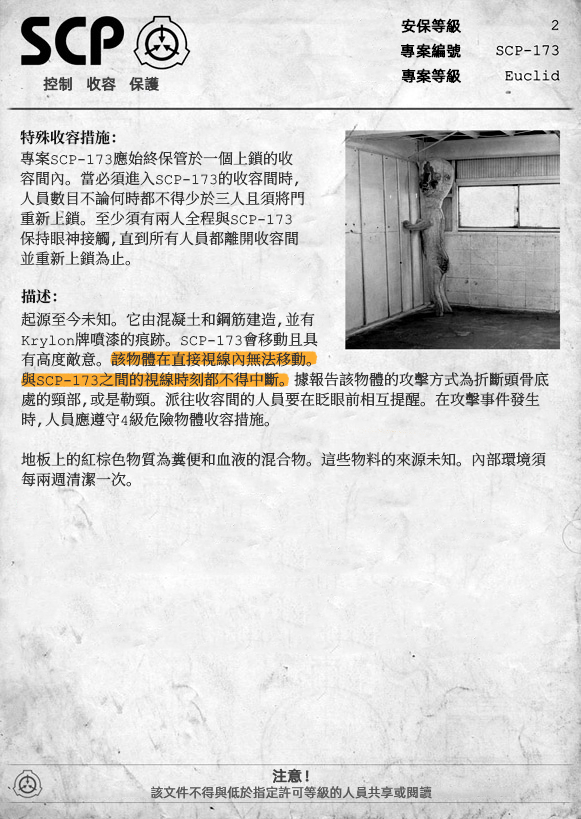
<style>
.page{position:relative;width:581px;height:819px}
.page>*{position:absolute;margin:0}
.t1{font:15px "AlibabaPuHuiTiR";color:#000000;font-weight:bold}
.t2{font:15px "AlibabaPuHuiTiR";color:#3d3d3d;font-weight:bold}
.t3{font:15px "ContainmentBreach-Bold";color:#121212}
.t4{font:15px/20px "ContainmentBreach-Regular";color:#353535}
.t5{font:15px "AlibabaPuHuiTiR";color:#414141;font-weight:bold}
.t6{font:13px "AlibabaPuHuiTiR";color:#575757}
</style>
<div class="page">
<p class="t1" style="left:401px;top:18px;width:60px;height:15px">安保等級</p>
<p class="t1" style="left:400px;top:43px;width:61px;height:15px">專案編號</p>
<p class="t2" style="left:43px;top:76px;width:116px;height:15px">控制   收容   保護</p>
<p class="t1" style="left:401px;top:68px;width:60px;height:15px">專案等級</p>
<p class="t3" style="left:20px;top:130px;width:96px;height:15px">特殊收容措施：</p>
<p class="t4" style="left:20px;top:151px;width:285px;height:115px">專案SCP-173應始終保管於一個上鎖的收<br>容間內。當必須進入SCP-173的收容間時，<br>人員數目不論何時都不得少於三人且須將門<br>重新上鎖。至少須有兩人全程與SCP-173<br>保持眼神接觸，直到所有人員都離開收容間<br>並重新上鎖為止。</p>
<p class="t3" style="left:21px;top:289px;width:36px;height:15px">描述：</p>
<p class="t4" style="left:21px;top:312px;width:528px;height:175px">起源至今未知。它由混凝土和鋼筋建造，並有<br>Krylon牌噴漆的痕跡。SCP-173會移動且具<br>有高度敵意。該物體在直接視線內無法移動。<br>與SCP-173之間的視線時刻都不得中斷。據報告該物體的攻擊方式為折斷頭骨底<br>處的頸部，或是勒頸。派往收容間的人員要在眨眼前相互提醒。在攻擊事件發生<br>時，人員應遵守4級危險物體收容措施。<br><br>地板上的紅棕色物質為糞便和血液的混合物。這些物料的來源未知。內部環境須<br>每兩週清潔一次。</p>
<p class="t5" style="left:272px;top:768px;width:37px;height:15px">注意！</p>
<p class="t6" style="left:151px;top:786px;width:281px;height:13px">該文件不得與低於指定許可等級的人員共享或閱讀</p>
</div>
